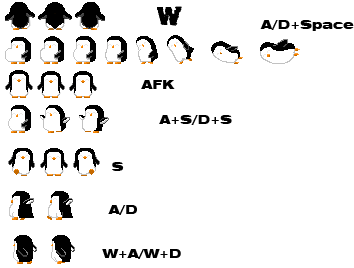
<style>
.page{position:relative;width:354px;height:268px;background:#ffffff}
.page>*{position:absolute;margin:0}
.t1{font:22.6px "Base05";color:#000000}
.t2{font:12px "Swiss721BT-BlackExtended";color:#000000}
</style>
<div class="page">
<p class="t1" style="left:157px;top:6px;width:25px;height:20px">W</p>
<p class="t2" style="left:260px;top:20px;width:94px;height:11px">A/D+Space</p>
<p class="t2" style="left:141px;top:80px;width:34px;height:9px">AFK</p>
<p class="t2" style="left:159px;top:115px;width:73px;height:10px">A+S/D+S</p>
<p class="t2" style="left:112px;top:162px;width:12px;height:9px">S</p>
<p class="t2" style="left:108px;top:205px;width:29px;height:10px">A/D</p>
<p class="t2" style="left:102px;top:249px;width:79px;height:10px">W+A/W+D</p>
</div>
